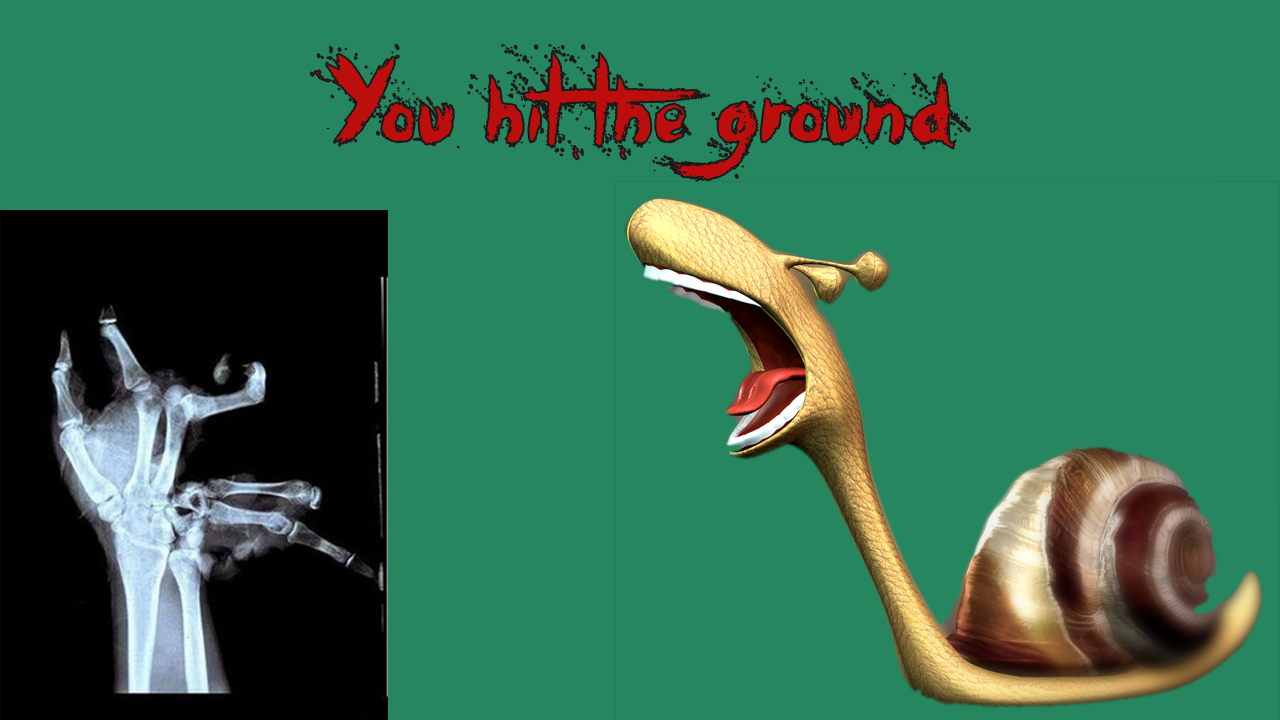
<style>
.page{position:relative;width:1280px;height:720px;background:#26865f}
.page>*{position:absolute;margin:0}
.t1{font:111.1px "OhNo";color:#bd0e0e}
</style>
<div class="page">
<p class="t1" style="left:310px;top:44px;width:660px;height:137px">You hit the ground</p>
</div>
